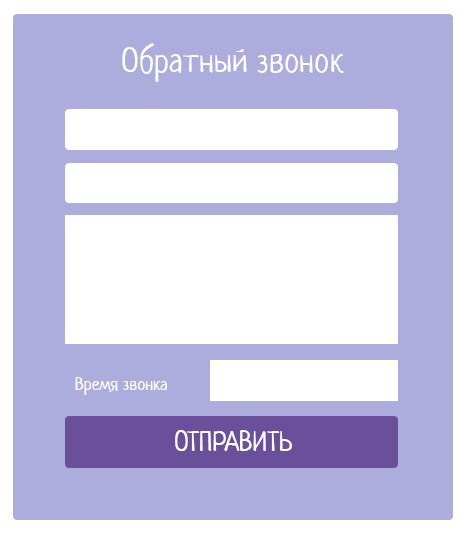
<style>
.page{position:relative;width:465px;height:537px;background:#acacdd}
.page>*{position:absolute;margin:0}
.t1{font:34px "Neucha";color:#ffffff}
.t2{font:18px "Neucha";color:#ffffff}
.t3{font:28px "Neucha";color:#ffffff}
</style>
<div class="page">
<p class="t1" style="left:122px;top:43px;width:222px;height:39px">Обратный звонок</p>
<p class="t2" style="left:75px;top:377px;width:92px;height:18px">Время звонка</p>
<p class="t3" style="left:175px;top:430px;width:117px;height:21px">ОТПРАВИТЬ</p>
</div>
